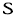
<style>
.page{position:relative;width:16px;height:16px;background:#ffffff}
.page>*{position:absolute;margin:0}
.t1{font:16px "PoorRichard-Regular";color:#000000;scale:1.45 1}
</style>
<div class="page">
<p class="t1" style="left:3px;top:2px;width:10px;height:13px">S</p>
</div>
